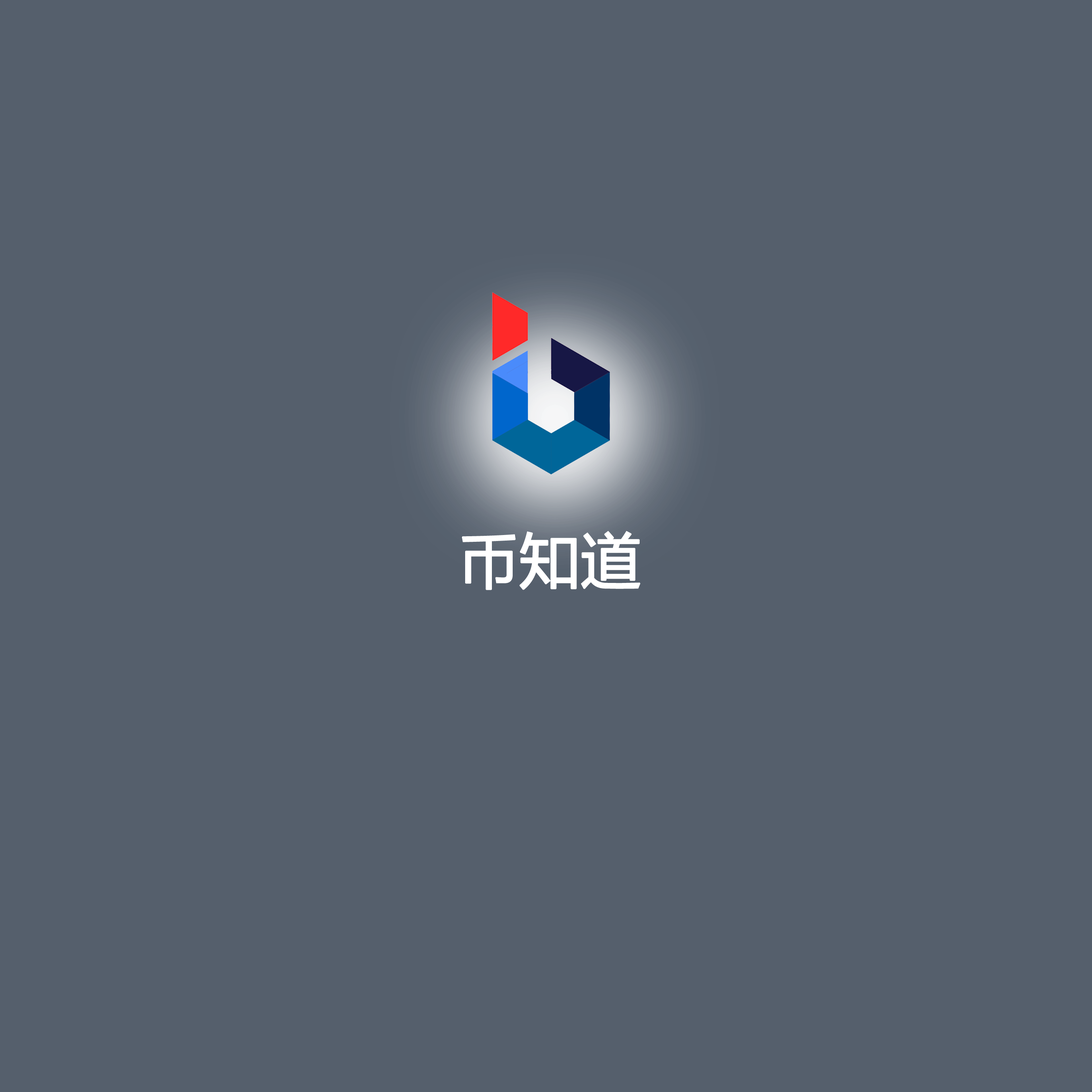
<style>
.page{position:relative;width:1092px;height:1092px;background:#555f6c}
.page>*{position:absolute;margin:0}
.t1{font:59.3px "MicrosoftYaHeiUI";color:#ffffff;font-weight:bold}
</style>
<div class="page">
<p class="t1" style="left:462px;top:531px;width:178px;height:59px">币知道</p>
</div>
